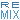
<style>
.page{position:relative;width:20px;height:20px;background:#ffffff}
.page>*{position:absolute;margin:0}
.t1{font:7.8px "ArialMT";letter-spacing:0.01em;color:#3979a2;scale:1.86 1}
.t2{font:12px "ArialMT";letter-spacing:0.01em;color:#5097c5;scale:0.93 1}
</style>
<div class="page">
<p class="t1" style="left:1px;top:2px;width:18px;height:6px">RE</p>
<p class="t2" style="left:1px;top:10px;width:18px;height:9px">MIX</p>
</div>
